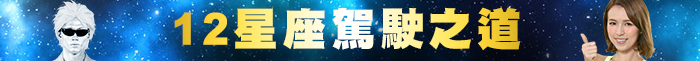
<style>
.page{position:relative;width:700px;height:61px}
.page>*{position:absolute;margin:0}
.t1{font:44.4px "DFHei-UB-HKP-BF";letter-spacing:0.1em}
</style>
<div class="page">
<p class="t1" style="left:174px;top:7px;width:347px;height:43px">12星座駕駛之道</p>
</div>
